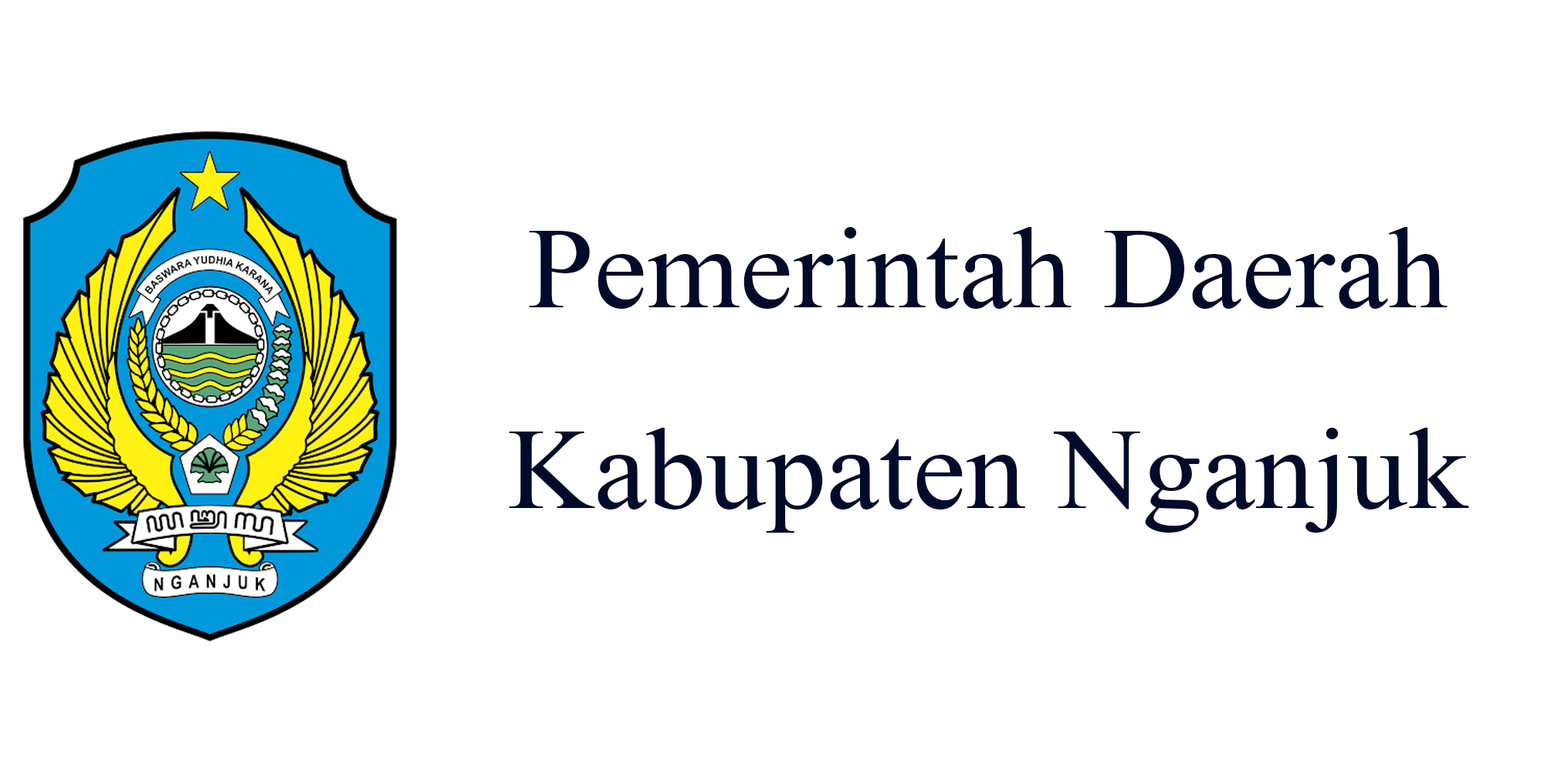
<style>
.page{position:relative;width:1544px;height:772px;background:#ffffff}
.page>*{position:absolute;margin:0}
.t1{font:114.8px "TimesNewRomanPSMT";color:#000a2b;scale:1.04 1}
</style>
<div class="page">
<p class="t1" style="left:509px;top:227px;width:960px;height:306px;text-align:center">Pemerintah Daerah<br>Kabupaten Nganjuk</p>
</div>
